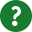
<style>
.page{position:relative;width:32px;height:32px;background:#197b30}
.page>*{position:absolute;margin:0}
.t1{font:24px "HoboStd";color:#ffffff}
</style>
<div class="page">
<p class="t1" style="left:11px;top:6px;width:10px;height:20px">?</p>
</div>
